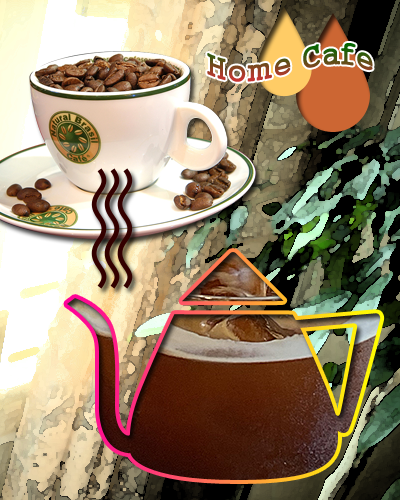
<style>
.page{position:relative;width:400px;height:500px}
.page>*{position:absolute;margin:0}
.t1{font:30px "Gungsuh"}
</style>
<div class="page">
<p class="t1" style="left:207px;top:43px;width:166px;height:39px">Home Cafe</p>
</div>
